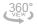
<style>
.page{position:relative;width:37px;height:26px;background:#ffffff}
.page>*{position:absolute;margin:0}
.t1{font:11.9px "ArialMT";color:#c0c0c0}
</style>
<div class="page">
<p class="t1" style="left:9px;top:3px;width:24px;height:9px">360°</p>
</div>
